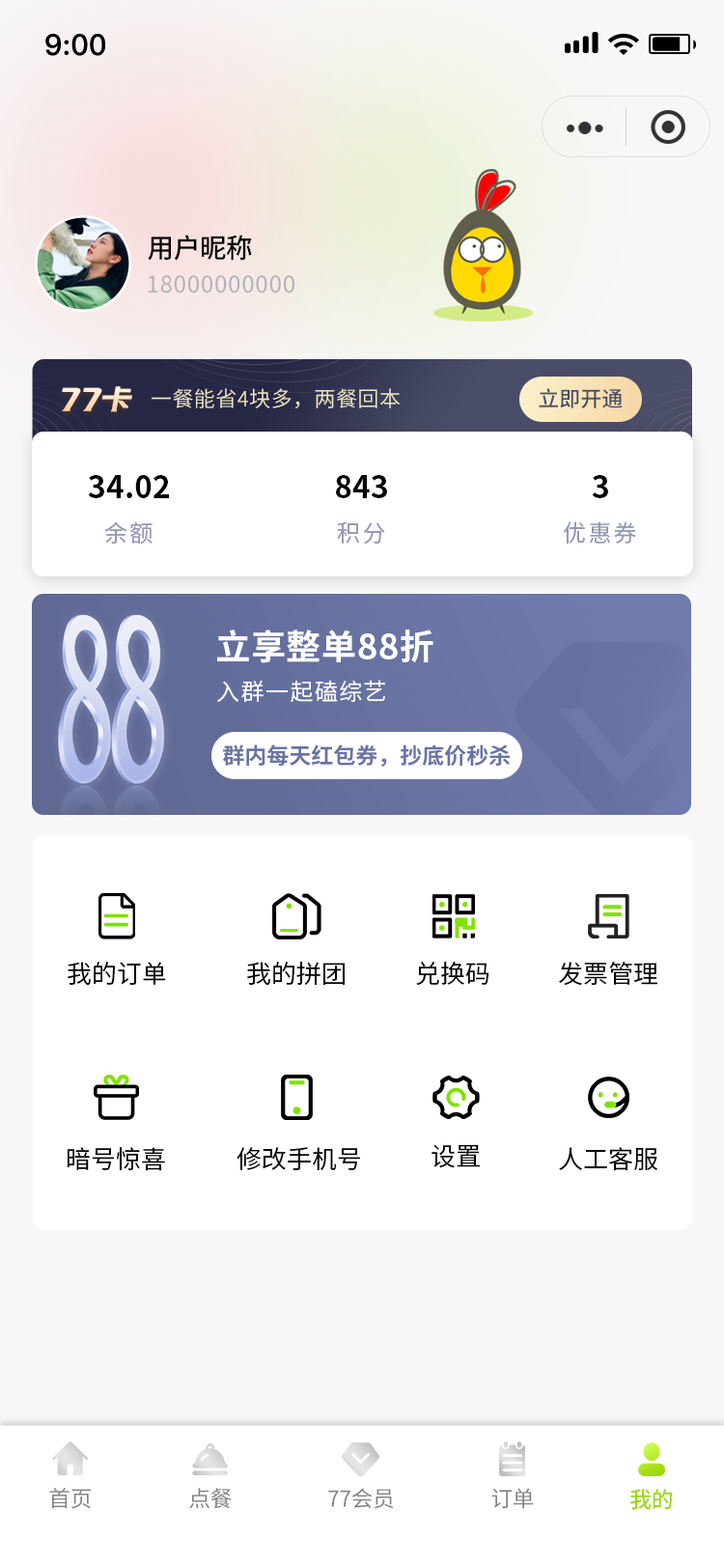
<style>
.page{position:relative;width:724px;height:1568px;background:#ffffff}
.page>*{position:absolute;margin:0}
.t1{font:29px "PingFang-SC-Bold";letter-spacing:0.02em;color:#000000}
.t2{font:27px "SourceHanSansCN-Medium";letter-spacing:-0.02em;color:#000000}
.t3{font:23.2px "SourceHanSansCN-Regular";letter-spacing:0.04em;color:#b3b2b9}
.t4{font:30.9px "zihun54hao-xianhei";letter-spacing:-0.02em;color:#ffe6ca;font-style:italic}
.t5{font:21.2px "SourceHanSansCN-Normal";letter-spacing:0.02em;color:#ebe5c1}
.t6{font:21.2px "SourceHanSansCN-Medium";color:#494d67}
.t7{font:30.9px "SourceHanSansCN-Bold";color:#000000}
.t8{font:23.2px "SourceHanSansCN-Regular";letter-spacing:0.1em;color:#969ab6}
.t9{font:34.8px "SourceHanSansCN-Bold";letter-spacing:0.02em;color:#ffffff}
.t10{font:23.2px "SourceHanSansCN-Normal";letter-spacing:0.06em;color:#ffffff}
.t11{font:22.2px "SourceHanSansCN-Bold";color:#6974a4}
.t12{font:25.1px "SourceHanSansCN-Regular";color:#000000}
.t13{font:22.2px "SourceHanSansCN-Regular";letter-spacing:-0.02em;color:#838383}
.t14{font:22.2px "SourceHanSansCN-Medium";letter-spacing:-0.02em;color:#9ed710}
</style>
<div class="page">
<p class="t1" style="left:45px;top:34px;width:60px;height:22px">9:00</p>
<p class="t2" style="left:148px;top:235px;width:104px;height:26px">用户昵称</p>
<p class="t3" style="left:148px;top:275px;width:146px;height:19px">18000000000</p>
<p class="t4" style="left:62px;top:386px;width:70px;height:26px">77卡</p>
<p class="t5" style="left:152px;top:388px;width:249px;height:20px">一餐能省4块多，两餐回本</p>
<p class="t6" style="left:539px;top:388px;width:84px;height:20px">立即开通</p>
<p class="t7" style="left:88px;top:475px;width:81px;height:23px">34.02</p>
<p class="t7" style="left:336px;top:475px;width:51px;height:23px">843</p>
<p class="t7" style="left:592px;top:475px;width:16px;height:23px">3</p>
<p class="t8" style="left:104px;top:521px;width:49px;height:24px">余额</p>
<p class="t8" style="left:337px;top:521px;width:48px;height:24px">积分</p>
<p class="t8" style="left:564px;top:521px;width:72px;height:23px">优惠券</p>
<p class="t9" style="left:217px;top:630px;width:217px;height:33px">立享整单88折</p>
<p class="t10" style="left:217px;top:680px;width:168px;height:22px">入群一起磕综艺</p>
<p class="t11" style="left:222px;top:744px;width:288px;height:23px">群内每天红包券，抄底价秒杀</p>
<p class="t12" style="left:68px;top:962px;width:98px;height:23px">我的订单</p>
<p class="t12" style="left:247px;top:962px;width:98px;height:24px">我的拼团</p>
<p class="t12" style="left:416px;top:962px;width:74px;height:24px">兑换码</p>
<p class="t12" style="left:559px;top:962px;width:99px;height:24px">发票管理</p>
<p class="t12" style="left:432px;top:1144px;width:48px;height:24px">设置</p>
<p class="t12" style="left:68px;top:1147px;width:97px;height:24px">暗号惊喜</p>
<p class="t12" style="left:237px;top:1147px;width:123px;height:23px">修改手机号</p>
<p class="t12" style="left:559px;top:1147px;width:99px;height:23px">人工客服</p>
<p class="t13" style="left:49px;top:1488px;width:42px;height:21px">首页</p>
<p class="t13" style="left:189px;top:1488px;width:43px;height:21px">点餐</p>
<p class="t13" style="left:328px;top:1488px;width:66px;height:21px">77会员</p>
<p class="t13" style="left:491px;top:1488px;width:43px;height:21px">订单</p>
<p class="t14" style="left:630px;top:1489px;width:42px;height:21px">我的</p>
</div>
